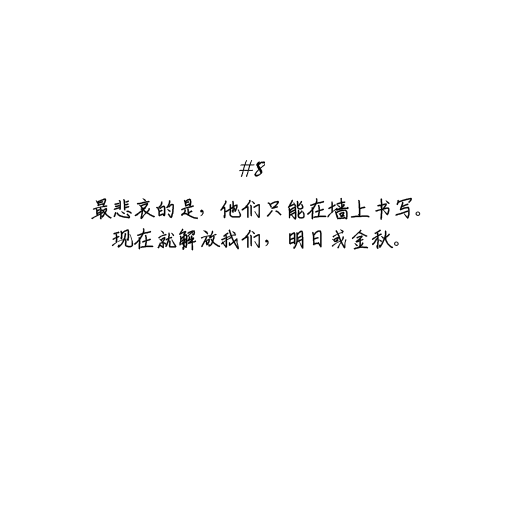
<style>
.page{position:relative;width:512px;height:512px;background:#ffffff}
.page>*{position:absolute;margin:0}
.t1{font:24px/30px "ShouShuti";letter-spacing:-0.1em;color:#000000}
</style>
<div class="page">
<p class="t1" style="left:91px;top:197px;width:330px;height:54px;text-align:center">最悲哀的是，他们只能在墙上书写。<br>现在就解放我们，明日或金秋。</p>
</div>
